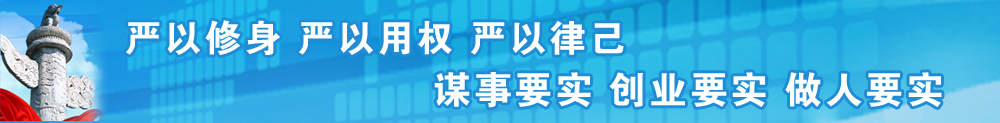
<style>
.page{position:relative;width:1000px;height:123px}
.page>*{position:absolute;margin:0}
.t1{font:37.3px "FZDHTJW--GB1-0";letter-spacing:0.07em;color:#ffffff}
.t2{font:37.9px "FZDHTJW--GB1-0";letter-spacing:0.07em;color:#ffffff}
</style>
<div class="page">
<p class="t1" style="left:126px;top:20px;width:498px;height:35px">严以修身 严以用权 严以律己</p>
<p class="t2" style="left:434px;top:72px;width:508px;height:36px">谋事要实 创业要实 做人要实</p>
</div>
